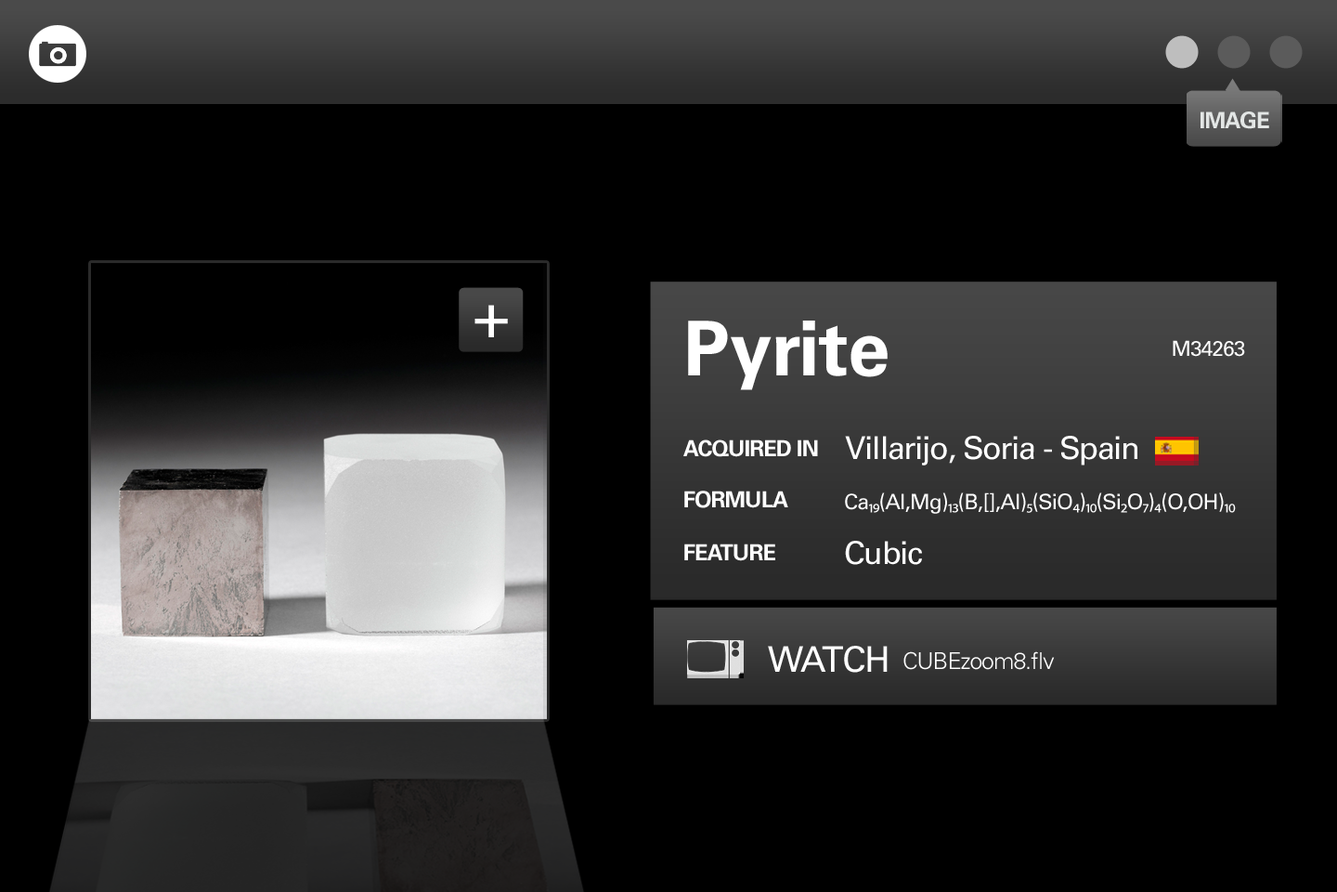
<style>
.page{position:relative;width:1337px;height:892px;background:#000000}
.page>*{position:absolute;margin:0}
.t1{font:22.5px "UniversLTStd-Bold";letter-spacing:-0.04em;color:#e3e6e5}
.t2{font:64px "UniversLTStd";letter-spacing:-0.04em;color:#ffffff}
.t3{font:75.9px "UniversLTStd-Bold";color:#ffffff}
.t4{font:21.1px "UniversLTStd";letter-spacing:-0.04em;color:#ffffff}
.t5{font:31.6px "UniversLTStd";letter-spacing:-0.04em;color:#ffffff}
.t6{font:22.1px "UniversLTStd-Bold";letter-spacing:-0.04em;color:#ffffff}
.t7{font:21.4px "UniversLTStd";letter-spacing:-0.04em;color:#ffffff}
.t8{font:21.4px "MyriadPro-Regular";letter-spacing:-0.04em;color:#ffffff}
.t9{font:35.6px "UniversLTStd";letter-spacing:-0.04em;color:#ffffff}
.t10{font:23.2px "UniversLTStd-Light";letter-spacing:-0.04em;color:#ffffff}
</style>
<div class="page">
<p class="t1" style="left:1201px;top:111px;width:69px;height:18px">IMAGE</p>
<p class="t2" style="left:475px;top:305px;width:33px;height:32px">+</p>
<p class="t3" style="left:688px;top:320px;width:200px;height:70px">Pyrite</p>
<p class="t4" style="left:1173px;top:340px;width:72px;height:17px">M34263</p>
<p class="t5" style="left:845px;top:436px;width:293px;height:29px">Villarijo, Soria - Spain</p>
<p class="t6" style="left:684px;top:439px;width:134px;height:18px">ACQUIRED IN</p>
<p class="t6" style="left:684px;top:490px;width:105px;height:18px">FORMULA</p>
<p class="t7" style="left:845px;top:492px;width:391px;height:22px">Ca<span class="t8">₁₉</span>(Al,Mg)<span class="t8">₁₃</span>(B,[],Al)<span class="t8">₅</span>(SiO<span class="t8">₄</span>)<span class="t8">₁₀</span>(Si<span class="t8">₂</span>O<span class="t8">₇</span>)<span class="t8">₄</span>(O,OH)<span class="t8">₁₀</span></p>
<p class="t6" style="left:684px;top:543px;width:92px;height:18px">FEATURE</p>
<p class="t5" style="left:845px;top:541px;width:77px;height:24px">Cubic</p>
<p class="t9" style="left:768px;top:645px;width:120px;height:27px">WATCH</p>
<p class="t10" style="left:904px;top:651px;width:151px;height:19px">CUBEzoom8.flv</p>
</div>
